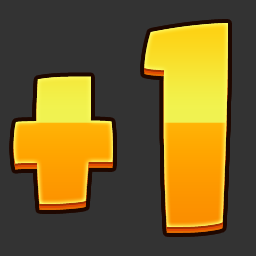
<style>
.page{position:relative;width:256px;height:256px;background:#333333}
.page>*{position:absolute;margin:0}
.t1{font:220.4px "Supercell-Magic";letter-spacing:0.06em}
</style>
<div class="page">
<p class="t1" style="left:13px;top:23px;width:215px;height:204px">+1</p>
</div>
